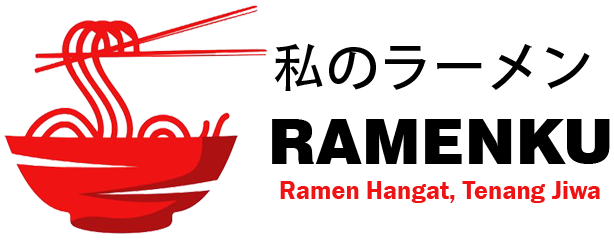
<style>
.page{position:relative;width:614px;height:241px;background:#ffffff}
.page>*{position:absolute;margin:0}
.t1{font:53.1px "AdobeHeitiStd-Regular";letter-spacing:0.01em;color:#000000}
.t2{font:61.9px "Swiss721BT-Black";letter-spacing:0.01em;color:#000000}
.t3{font:25.6px "FranklinGothic-Demi";letter-spacing:0.01em;color:#ef1313}
</style>
<div class="page">
<p class="t1" style="left:274px;top:43px;width:316px;height:48px">私のラーメン</p>
<p class="t2" style="left:272px;top:119px;width:338px;height:45px">RAMENKU</p>
<p class="t3" style="left:280px;top:181px;width:320px;height:22px">Ramen Hangat, Tenang Jiwa</p>
</div>
